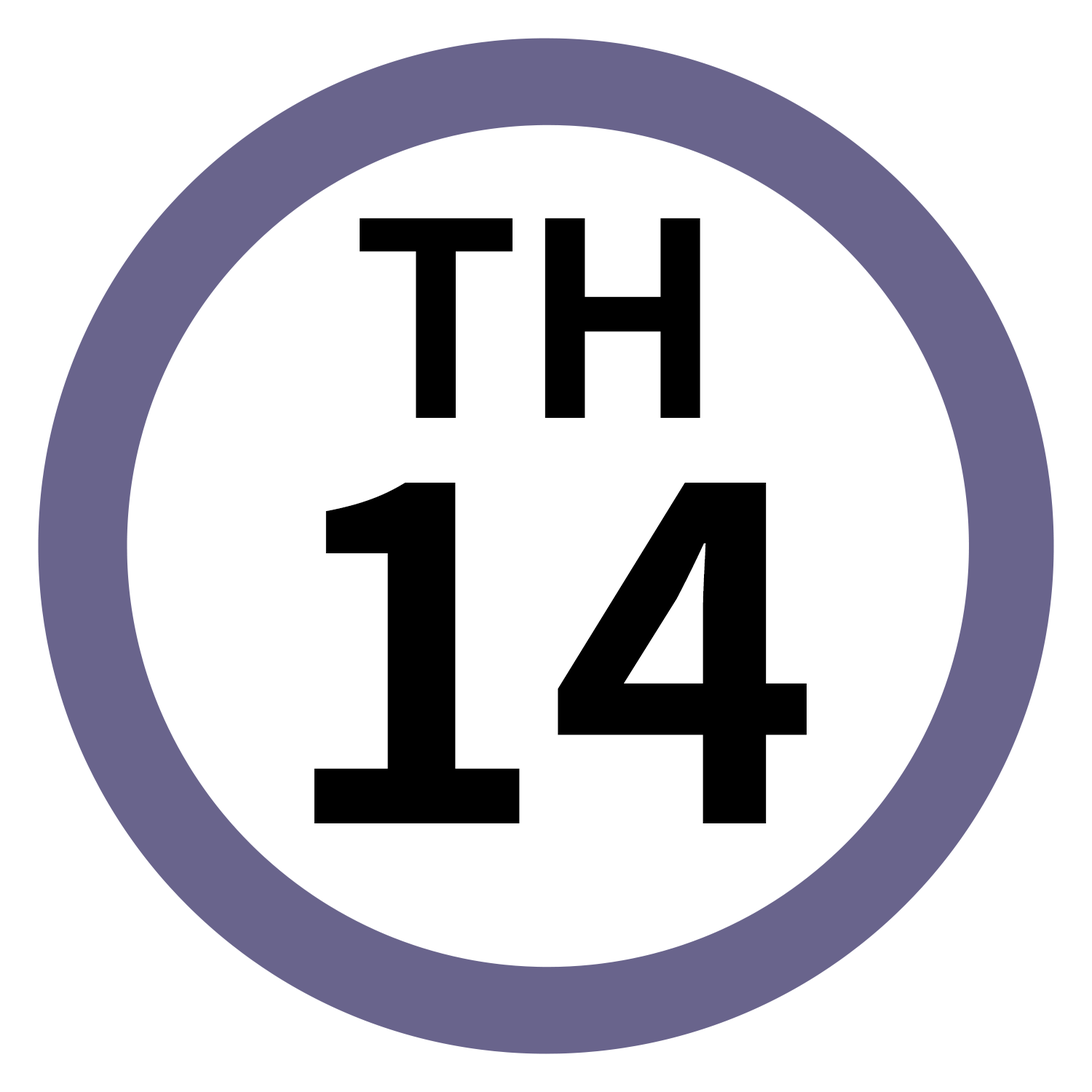
<style>
.page{position:relative;width:1092px;height:1092px;background:#ffffff}
.page>*{position:absolute;margin:0}
.t1{font:269.8px "NotoSansJP-Bold";color:#000000}
.t2{font:460.5px "NotoSansJP-Bold";color:#000000}
</style>
<div class="page">
<p class="t1" style="left:360px;top:218px;width:340px;height:200px">TH</p>
<p class="t2" style="left:314px;top:483px;width:493px;height:340px">14</p>
</div>
